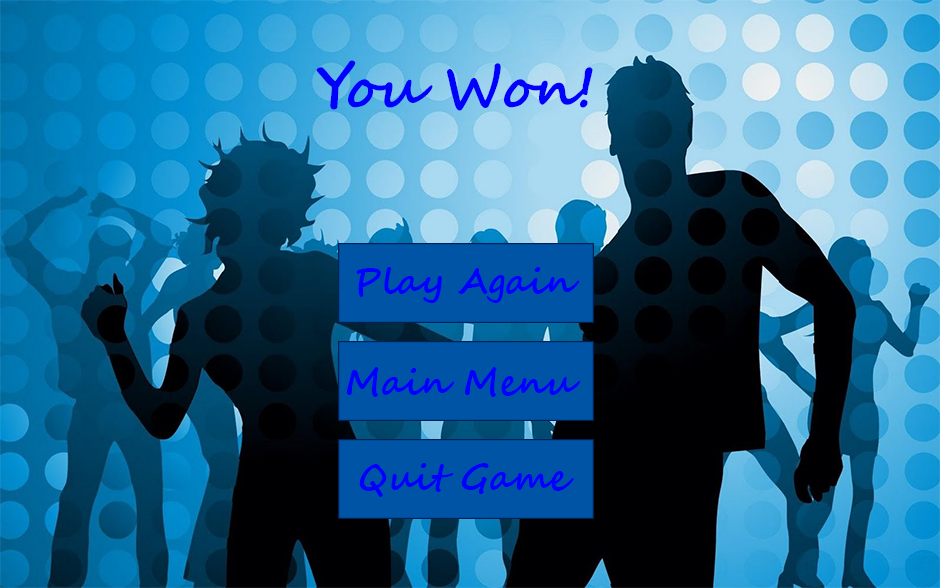
<style>
.page{position:relative;width:940px;height:588px}
.page>*{position:absolute;margin:0}
.t1{font:56.4px "SegoeScript-Bold";color:#0100ff}
.t2{font:36px "SegoeScript-Bold";color:#0100ff}
</style>
<div class="page">
<p class="t1" style="left:316px;top:60px;width:277px;height:51px">You Won!</p>
<p class="t2" style="left:356px;top:267px;width:224px;height:36px">Play Again</p>
<p class="t2" style="left:347px;top:367px;width:233px;height:30px">Main Menu</p>
<p class="t2" style="left:359px;top:463px;width:215px;height:34px">Quit Game</p>
</div>
